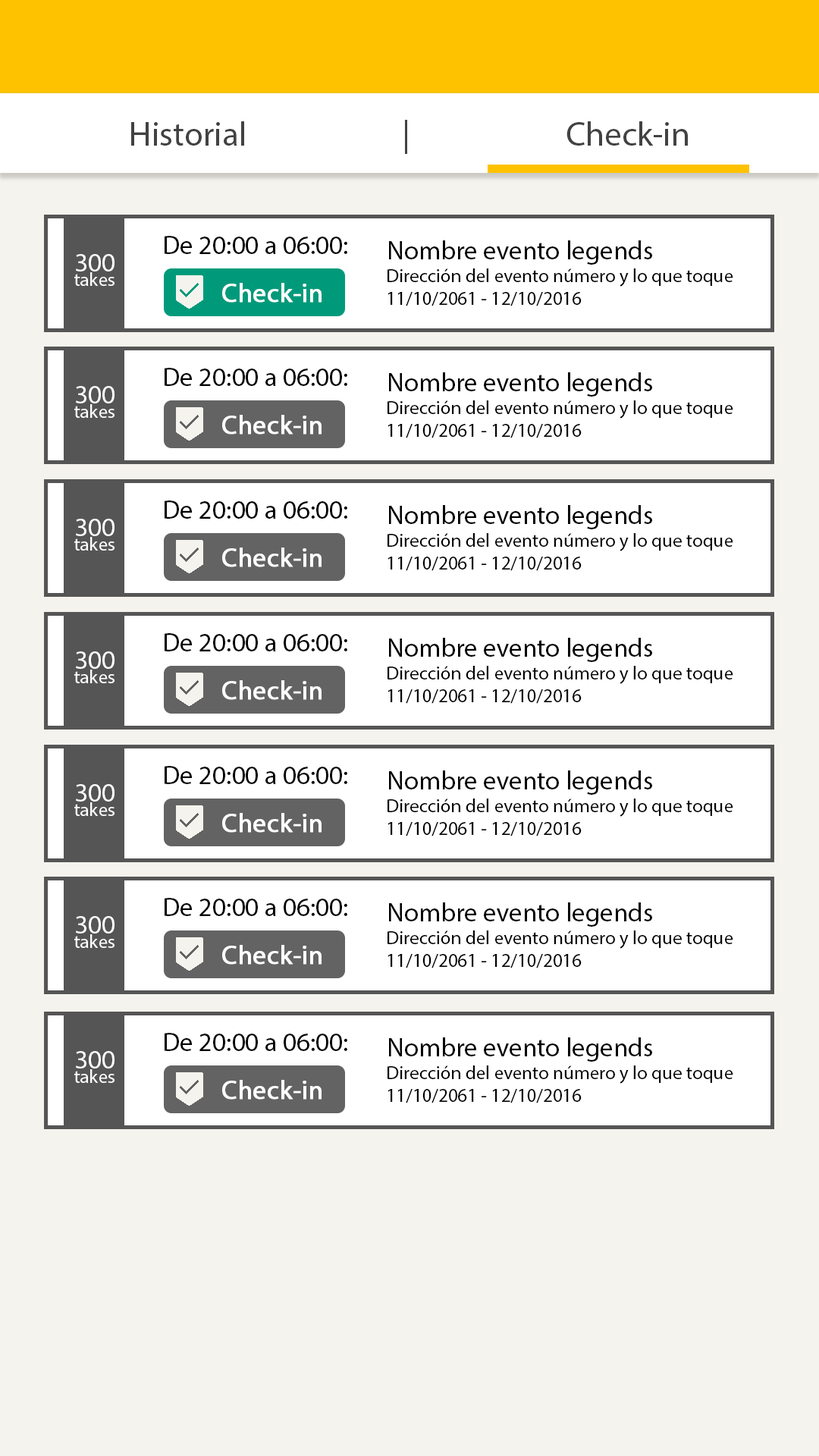
<style>
.page{position:relative;width:819px;height:1456px;background:#ffffff}
.page>*{position:absolute;margin:0}
.t1{font:34.1px "MyriadPro-Regular";color:#424242}
.t2{font:26.5px "MyriadPro-Regular";color:#000000}
.t3{font:19px "MyriadPro-Regular";color:#000000}
.t4{font:19px/14.4px "MyriadPro-Regular";color:#ffffff}
.t5{font:26.5px "MyriadPro-Regular";color:#ffffff}
.t6{font:26.5px "MyriadPro-Regular";color:#ffffff;font-weight:bold}
</style>
<div class="page">
<p class="t1" style="left:131px;top:120px;width:557px;height:34px">Historial      |      Check-in</p>
<p class="t2" style="left:165px;top:236px;width:182px;height:18px">De 20:00 a 06:00:</p>
<p class="t3" style="left:388px;top:240px;width:345px;height:66px"><span class="t2">Nombre evento legends<br></span>Dirección del evento número y lo que toque<br>11/10/2061 - 12/10/2016</p>
<p class="t4" style="left:74px;top:254px;width:41px;height:32px;text-align:center"><span class="t5">300<br></span>takes</p>
<p class="t6" style="left:222px;top:283px;width:100px;height:20px">Check-in</p>
<p class="t2" style="left:165px;top:368px;width:182px;height:18px">De 20:00 a 06:00:</p>
<p class="t3" style="left:388px;top:372px;width:345px;height:66px"><span class="t2">Nombre evento legends<br></span>Dirección del evento número y lo que toque<br>11/10/2061 - 12/10/2016</p>
<p class="t4" style="left:74px;top:386px;width:41px;height:32px;text-align:center"><span class="t5">300<br></span>takes</p>
<p class="t6" style="left:222px;top:415px;width:100px;height:20px">Check-in</p>
<p class="t2" style="left:165px;top:500px;width:182px;height:19px">De 20:00 a 06:00:</p>
<p class="t3" style="left:388px;top:505px;width:345px;height:66px"><span class="t2">Nombre evento legends<br></span>Dirección del evento número y lo que toque<br>11/10/2061 - 12/10/2016</p>
<p class="t4" style="left:74px;top:519px;width:41px;height:32px;text-align:center"><span class="t5">300<br></span>takes</p>
<p class="t6" style="left:222px;top:548px;width:100px;height:19px">Check-in</p>
<p class="t2" style="left:165px;top:633px;width:182px;height:18px">De 20:00 a 06:00:</p>
<p class="t3" style="left:388px;top:638px;width:345px;height:66px"><span class="t2">Nombre evento legends<br></span>Dirección del evento número y lo que toque<br>11/10/2061 - 12/10/2016</p>
<p class="t4" style="left:74px;top:651px;width:41px;height:32px;text-align:center"><span class="t5">300<br></span>takes</p>
<p class="t6" style="left:222px;top:680px;width:100px;height:20px">Check-in</p>
<p class="t2" style="left:165px;top:766px;width:182px;height:18px">De 20:00 a 06:00:</p>
<p class="t3" style="left:388px;top:770px;width:345px;height:66px"><span class="t2">Nombre evento legends<br></span>Dirección del evento número y lo que toque<br>11/10/2061 - 12/10/2016</p>
<p class="t4" style="left:74px;top:784px;width:41px;height:32px;text-align:center"><span class="t5">300<br></span>takes</p>
<p class="t6" style="left:222px;top:813px;width:100px;height:20px">Check-in</p>
<p class="t2" style="left:165px;top:898px;width:182px;height:18px">De 20:00 a 06:00:</p>
<p class="t3" style="left:388px;top:902px;width:345px;height:66px"><span class="t2">Nombre evento legends<br></span>Dirección del evento número y lo que toque<br>11/10/2061 - 12/10/2016</p>
<p class="t4" style="left:74px;top:916px;width:41px;height:32px;text-align:center"><span class="t5">300<br></span>takes</p>
<p class="t6" style="left:222px;top:945px;width:100px;height:20px">Check-in</p>
<p class="t2" style="left:165px;top:1033px;width:182px;height:18px">De 20:00 a 06:00:</p>
<p class="t3" style="left:388px;top:1037px;width:345px;height:66px"><span class="t2">Nombre evento legends<br></span>Dirección del evento número y lo que toque<br>11/10/2061 - 12/10/2016</p>
<p class="t4" style="left:74px;top:1051px;width:41px;height:32px;text-align:center"><span class="t5">300<br></span>takes</p>
<p class="t6" style="left:222px;top:1080px;width:100px;height:20px">Check-in</p>
</div>
